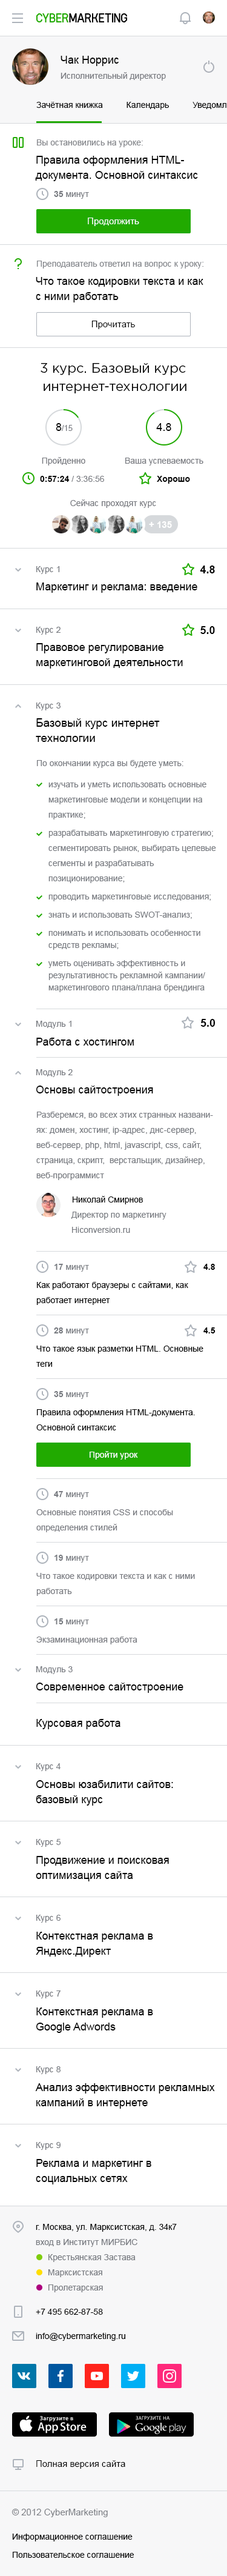
<style>
.page{position:relative;width:227px;height:2576px;background:#ffffff}
.page>*{position:absolute;margin:0}
.t1{font:10.9px "ArialMT";color:#000000}
.t2{font:8.5px "ArialMT";color:#787a80}
.t3{font:8.5px "ArialMT";color:#83858a}
.t4{font:10.9px/15.2px "ArialMT";color:#000000}
.t5{font:8.5px "ArialMT";color:#787b81}
.t6{font:8.5px "Arial-BoldMT";color:#787b81}
.t7{font:9.1px "ArialMT";color:#ffffff}
.t8{font:8.5px "ArialMT";color:#83868b}
.t9{font:9.1px "ArialMT";color:#000000}
.t10{font:13.3px/18.2px "GothamPro";color:#000000}
.t11{font:7.9px "ArialMT";color:#787a80}
.t12{font:8.5px "Arial-BoldMT";color:#000000}
.t13{font:8.5px "Arial-BoldMT";color:#010101}
.t14{font:9.1px "Arial-BoldMT";color:#ffffff;text-transform:uppercase}
.t15{font:10.9px "Arial-BoldMT";color:#000000}
.t16{font:11.5px/15.2px "ArialMT";color:#000000}
.t17{font:8.5px/15.2px "ArialMT";color:#787b81}
.t18{font:8.5px/12.1px "ArialMT";color:#787b81}
.t19{font:8.5px/18.2px "ArialMT";color:#787b81}
.t20{font:8.5px "ArialMT";color:#000000}
.t21{font:8.5px/15.2px "ArialMT";color:#000000}
.t22{font:8.5px "ArialMT";color:#ffffff}
.t23{font:8.5px/15.2px "ArialMT";color:#787a80}
.t24{font:8.5px/24.2px "ArialMT";color:#000000}
.t25{font:9.1px "ArialMT";color:#787b81}
</style>
<div class="page">
<p class="t1" style="left:61px;top:56px;width:58px;height:10px">Чак Норрис</p>
<p class="t2" style="left:61px;top:72px;width:105px;height:9px">Исполнительный директор</p>
<p class="t3" style="left:37px;top:139px;width:106px;height:8px">Вы остановились на уроке:</p>
<p class="t4" style="left:35px;top:156px;width:163px;height:25px">Правила оформления HTML-<br>документа. Основной синтаксис</p>
<p class="t5" style="left:54px;top:191px;width:35px;height:8px"><span class="t6">35</span> минут</p>
<p class="t7" style="left:88px;top:218px;width:51px;height:8px">Продолжить</p>
<p class="t8" style="left:37px;top:261px;width:167px;height:8px">Преподаватель ответил на вопрос к уроку:</p>
<p class="t4" style="left:36px;top:277px;width:168px;height:25px">Что такое кодировки текста и как <br>с ними работать</p>
<p class="t9" style="left:92px;top:321px;width:43px;height:8px">Прочитать</p>
<p class="t10" style="left:41px;top:363px;width:146px;height:30px;text-align:center">3 курс. Базовый курс <br>интернет-технологии</p>
<p class="t11" style="left:56px;top:423px;width:17px;height:8px"><span class="t1">8</span>/15</p>
<p class="t1" style="left:156px;top:423px;width:16px;height:8px">4.8</p>
<p class="t2" style="left:42px;top:457px;width:43px;height:8px">Пройденно</p>
<p class="t2" style="left:125px;top:458px;width:79px;height:7px">Ваша успеваемость</p>
<p class="t2" style="left:40px;top:476px;width:64px;height:6px"><span class="t12">0:57:24</span> / 3:36:56</p>
<p class="t13" style="left:157px;top:476px;width:33px;height:8px">Хорошо</p>
<p class="t2" style="left:70px;top:499px;width:86px;height:9px">Сейчас проходят курс</p>
<p class="t14" style="left:149px;top:521px;width:23px;height:7px">+ 135</p>
<p class="t5" style="left:36px;top:566px;width:24px;height:8px">Курс 1</p>
<p class="t15" style="left:200px;top:566px;width:15px;height:7px">4.8</p>
<p class="t1" style="left:36px;top:582px;width:162px;height:11px">Маркетинг и реклама: введение</p>
<p class="t5" style="left:36px;top:627px;width:25px;height:8px">Курс 2</p>
<p class="t15" style="left:201px;top:626px;width:14px;height:8px">5.0</p>
<p class="t4" style="left:36px;top:643px;width:147px;height:26px">Правовое регулирование <br>маркетинговой деятельности</p>
<p class="t5" style="left:36px;top:702px;width:25px;height:8px">Курс 3</p>
<p class="t16" style="left:36px;top:718px;width:124px;height:24px">Базовый курс интернет <br>технологии</p>
<p class="t5" style="left:37px;top:760px;width:147px;height:8px">По окончании курса вы будете уметь:</p>
<p class="t17" style="left:48px;top:782px;width:168px;height:210px">изучать и уметь использовать основные <br>маркетинговые модели и концепции на <br>практик<span class="t18">е;</span><span class="t19"><br>разрабат</span>ывать маркетинговую стратегию;<br>сегментировать рынок, выбирать целевые <br>сегменты и разрабатывать <br>позиционирова<span class="t18">ние;</span><span class="t19"><br>проводить маркетинговые исследования;<br>знать и использовать SWOT-анализ;<br>понимать и использовать осо</span><span class="t18">бенности <br>средств рекламы;</span><span class="t19"><br>уметь оценивать эффекти</span><span class="t18">вность и <br>результативность рекламной кампании/<br>маркетингового плана/плана брендинга</span></p>
<p class="t5" style="left:36px;top:1021px;width:36px;height:8px">Модуль 1</p>
<p class="t15" style="left:201px;top:1019px;width:15px;height:8px">5.0</p>
<p class="t1" style="left:36px;top:1038px;width:98px;height:8px">Работа с хостингом</p>
<p class="t5" style="left:36px;top:1069px;width:37px;height:8px">Модуль 2</p>
<p class="t1" style="left:36px;top:1086px;width:117px;height:10px">Основы сайтостроения</p>
<p class="t17" style="left:36px;top:1112px;width:177px;height:68px">Разберемся, во всех этих странных названиях: домен, хостинг, ip-адрес, днс-сервер, веб-сервер, php, html, javascript, css, сайт, страница, скрипт,  верстальщик, дизайнер, веб-программист</p>
<p class="t20" style="left:73px;top:1196px;width:70px;height:8px">Николай Смирнов</p>
<p class="t17" style="left:71px;top:1212px;width:96px;height:21px">Директор по маркетингу <br>Hiconversion.ru</p>
<p class="t5" style="left:55px;top:1264px;width:34px;height:8px"><span class="t6">17</span> минут</p>
<p class="t12" style="left:204px;top:1264px;width:11px;height:6px">4.8</p>
<p class="t21" style="left:36px;top:1281px;width:153px;height:24px">Как работают браузеры с сайтами, как <br>работает интернет</p>
<p class="t5" style="left:54px;top:1327px;width:35px;height:8px"><span class="t6">28</span> минут</p>
<p class="t12" style="left:204px;top:1327px;width:12px;height:6px">4.5</p>
<p class="t21" style="left:36px;top:1346px;width:168px;height:21px">Что такое язык разметки HTML. Основные <br>теги</p>
<p class="t5" style="left:54px;top:1391px;width:35px;height:8px"><span class="t6">35</span> минут</p>
<p class="t21" style="left:36px;top:1409px;width:159px;height:21px">Правила оформления HTML-документа. <br>Основной синтаксис</p>
<p class="t22" style="left:90px;top:1451px;width:48px;height:9px">Пройти урок</p>
<p class="t5" style="left:54px;top:1491px;width:35px;height:8px"><span class="t6">47</span> минут</p>
<p class="t23" style="left:36px;top:1509px;width:137px;height:23px">Основные понятия CSS и способы <br>определения стилей</p>
<p class="t5" style="left:55px;top:1555px;width:34px;height:8px"><span class="t6">19</span> минут</p>
<p class="t23" style="left:36px;top:1573px;width:159px;height:23px">Что такое кодировки текста и как с ними <br>работать</p>
<p class="t5" style="left:55px;top:1618px;width:34px;height:8px"><span class="t6">15</span> минут</p>
<p class="t2" style="left:36px;top:1637px;width:102px;height:7px">Экзаминационная работа</p>
<p class="t5" style="left:36px;top:1666px;width:37px;height:8px">Модуль 3</p>
<p class="t1" style="left:36px;top:1683px;width:148px;height:10px">Современное сайтостроение</p>
<p class="t1" style="left:36px;top:1719px;width:85px;height:10px">Курсовая работа</p>
<p class="t5" style="left:36px;top:1763px;width:25px;height:8px">Курс 4</p>
<p class="t4" style="left:36px;top:1780px;width:137px;height:26px">Основы юзабилити сайтов: <br>базовый курс</p>
<p class="t5" style="left:36px;top:1839px;width:25px;height:8px">Курс 5</p>
<p class="t4" style="left:36px;top:1856px;width:133px;height:25px">Продвижение и поисковая <br>оптимизация сайта</p>
<p class="t5" style="left:36px;top:1915px;width:25px;height:8px">Курс 6</p>
<p class="t4" style="left:36px;top:1932px;width:117px;height:25px">Контекстная реклама в <br>Яндекс.Директ</p>
<p class="t5" style="left:36px;top:1990px;width:25px;height:8px">Курс 7</p>
<p class="t4" style="left:36px;top:2007px;width:117px;height:26px">Контекстная реклама в <br>Google Adwords</p>
<p class="t5" style="left:36px;top:2066px;width:25px;height:8px">Курс 8</p>
<p class="t4" style="left:35px;top:2083px;width:180px;height:26px">Анализ эффективности рекламных <br>кампаний в интернете</p>
<p class="t5" style="left:36px;top:2142px;width:25px;height:8px">Курс 9</p>
<p class="t4" style="left:36px;top:2159px;width:116px;height:25px">Реклама и маркетинг в <br>социальных сетях</p>
<p class="t21" style="left:36px;top:2224px;width:141px;height:23px">г. Москва, ул. Марксистская, д. 34к7<br><span class="t17">вход в Институт МИРБИС</span></p>
<p class="t5" style="left:48px;top:2254px;width:88px;height:8px">Крестьянская Застава</p>
<p class="t5" style="left:48px;top:2269px;width:54px;height:8px">Марксистская</p>
<p class="t5" style="left:48px;top:2284px;width:55px;height:8px">Пролетарская</p>
<p class="t24" style="left:36px;top:2309px;width:89px;height:32px">+7 495 662-87-58<br>info@cybermarketing.ru</p>
<p class="t9" style="left:36px;top:2460px;width:89px;height:9px">Полная версия сайта</p>
<p class="t25" style="left:12px;top:2509px;width:96px;height:8px">© 2012 CyberMarketing</p>
<p class="t20" style="left:12px;top:2534px;width:121px;height:7px">Информационное соглашение</p>
<p class="t20" style="left:13px;top:2552px;width:122px;height:6px">Пользовательское соглашение</p>
</div>
